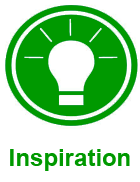
<style>
.page{position:relative;width:140px;height:182px;background:#ffffff}
.page>*{position:absolute;margin:0}
.t1{font:24px "Arial-BoldMT";color:#009900}
</style>
<div class="page">
<p class="t1" style="left:10px;top:149px;width:120px;height:22px">Inspiration</p>
</div>
